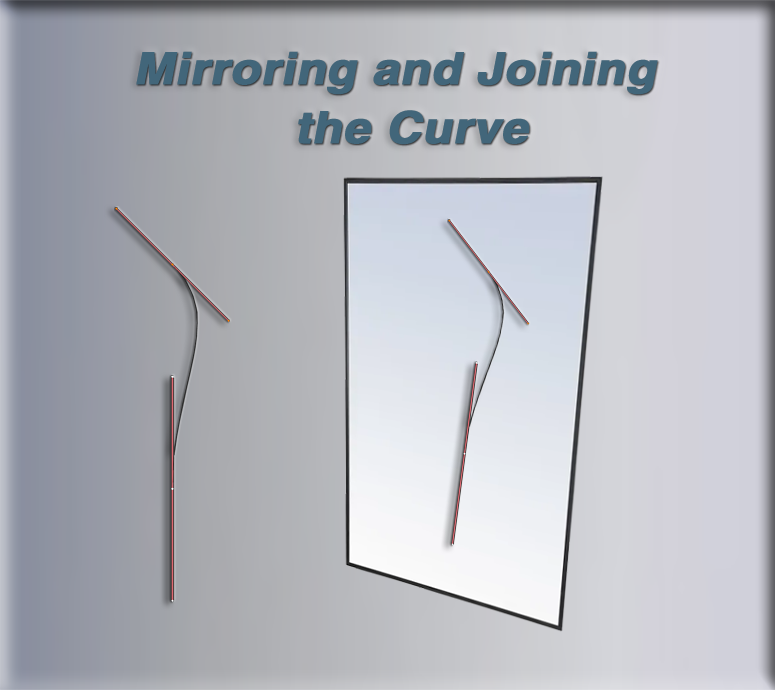
<style>
.page{position:relative;width:775px;height:690px}
.page>*{position:absolute;margin:0}
.t1{font:44.6px "HelveticaLTStd-Bold";color:#42667a;font-weight:bold;font-style:italic;scale:1.08 1}
</style>
<div class="page">
<p class="t1" style="left:136px;top:51px;width:522px;height:44px">Mirroring and Joining</p>
<p class="t1" style="left:298px;top:110px;width:232px;height:35px">the Curve</p>
</div>
